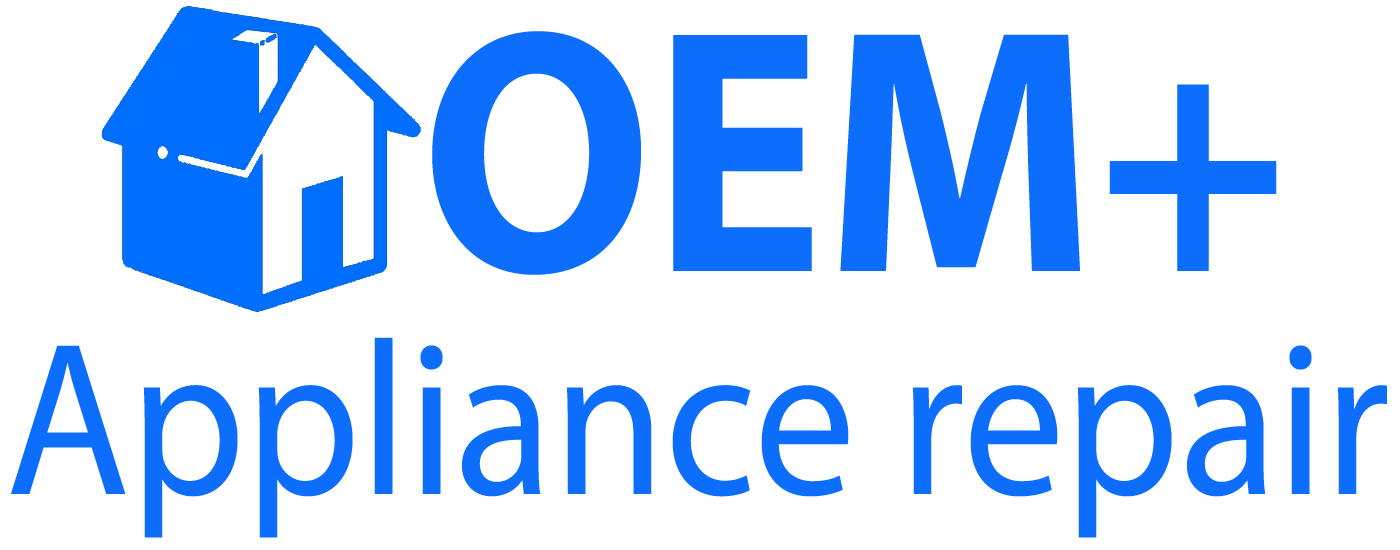
<style>
.page{position:relative;width:1400px;height:550px;background:#ffffff}
.page>*{position:absolute;margin:0}
.t1{font:350px "MyriadPro-Bold";color:#0d6efd;scale:0.92 1}
.t2{font:220px "MyriadPro-Regular";color:#0d6efd;scale:0.92 1}
</style>
<div class="page">
<p class="t1" style="left:432px;top:31px;width:845px;height:244px">OEM+</p>
<p class="t2" style="left:11px;top:337px;width:1376px;height:201px">Appliance repair</p>
</div>
